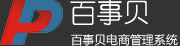
<style>
.page{position:relative;width:180px;height:46px;background:#333333}
.page>*{position:absolute;margin:0}
.t1{font:27.3px "YouYuan";letter-spacing:-0.01em;color:#ffffff}
.t2{font:12px "FZLTXHK--GBK1-0";letter-spacing:-0.01em}
</style>
<div class="page">
<p class="t1" style="left:70px;top:0px;width:78px;height:26px">百事贝</p>
<p class="t2" style="left:71px;top:33px;width:107px;height:13px">百事贝电商管理系统</p>
</div>
